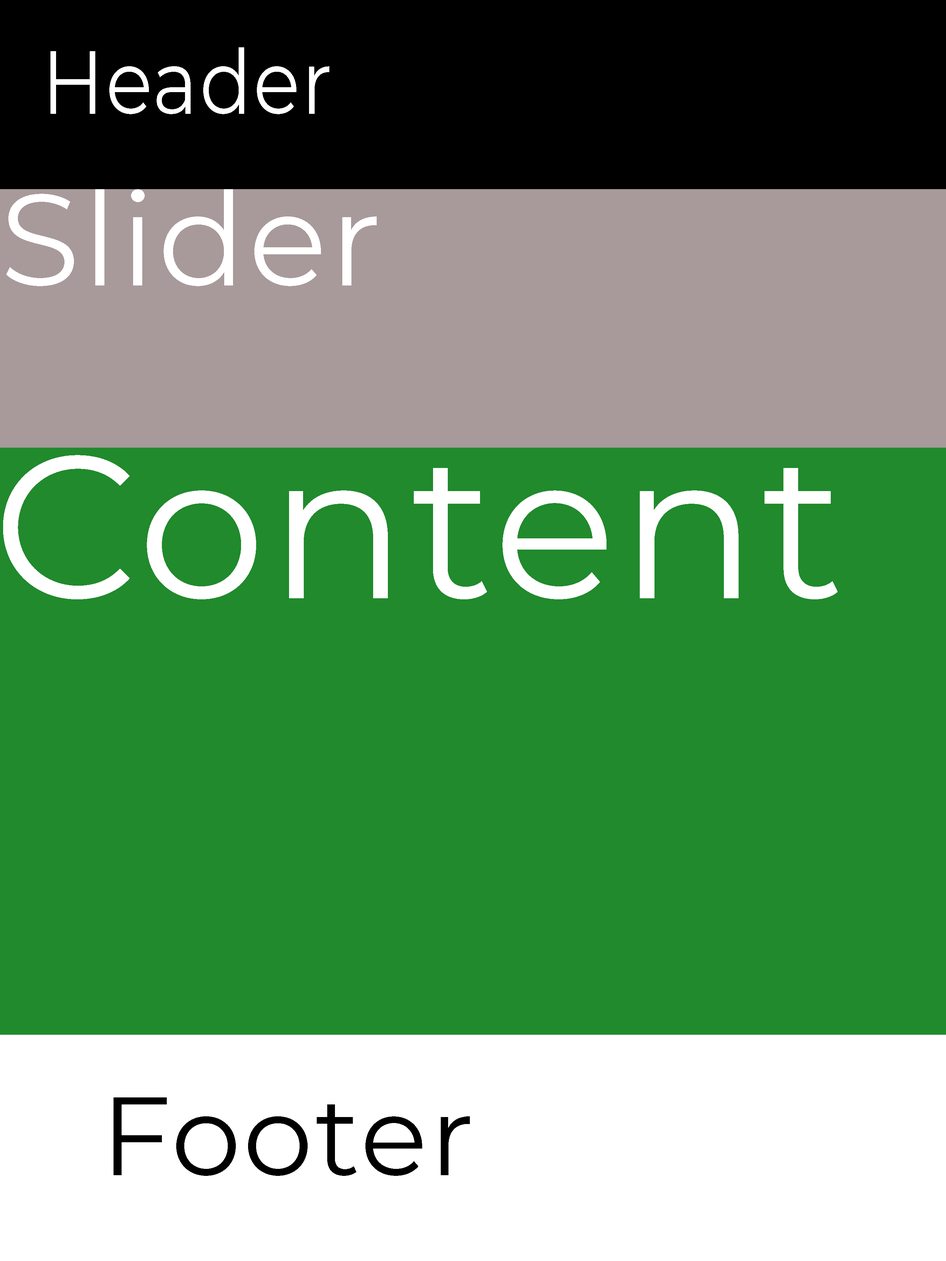
<style>
.page{position:relative;width:946px;height:1261px;background:#208a2c}
.page>*{position:absolute;margin:0}
.t1{font:89.8px "Montserrat-Regular";letter-spacing:0.02em;color:#ffffff;scale:0.86 1}
.t2{font:129.9px "Montserrat-Regular";letter-spacing:0.02em;color:#ffffff}
.t3{font:202.9px "Montserrat-Regular";letter-spacing:0.02em;color:#ffffff}
.t4{font:110.9px "Montserrat-Regular";letter-spacing:0.02em;color:#000000}
</style>
<div class="page">
<p class="t1" style="left:50px;top:47px;width:279px;height:67px">Header</p>
<p class="t2" style="left:6px;top:189px;width:371px;height:97px">Slider</p>
<p class="t3" style="left:3px;top:455px;width:834px;height:144px">Content</p>
<p class="t4" style="left:113px;top:1097px;width:357px;height:79px">Footer</p>
</div>
